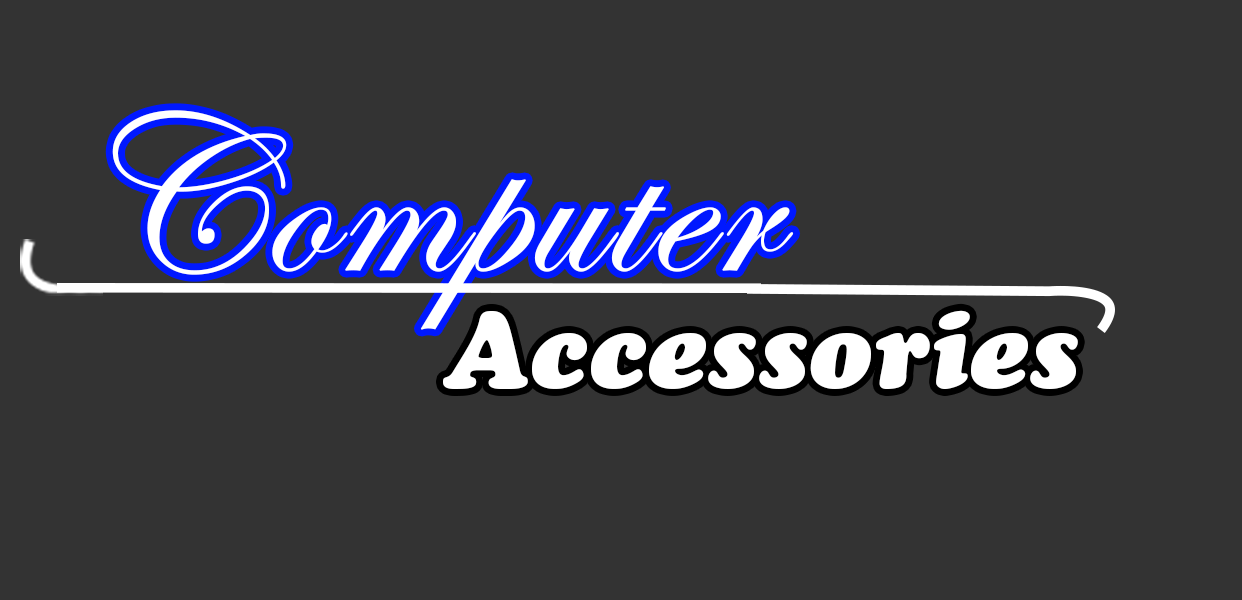
<style>
.page{position:relative;width:1242px;height:600px;background:#333333}
.page>*{position:absolute;margin:0}
.t1{font:225.9px "EdwardianScriptITC";color:#ffffff;font-weight:bold}
.t2{font:106.6px "CooperBlackStd-Italic";color:#ffffff}
</style>
<div class="page">
<p class="t1" style="left:112px;top:110px;width:682px;height:220px">Computer</p>
<p class="t2" style="left:443px;top:310px;width:635px;height:79px">Accessories</p>
</div>
